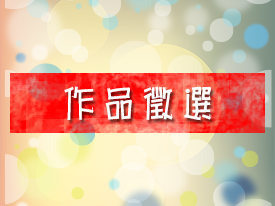
<style>
.page{position:relative;width:275px;height:206px}
.page>*{position:absolute;margin:0}
.t1{font:36px "ARHaiBaoB5-Bold";letter-spacing:0.1em;color:#fffefe}
</style>
<div class="page">
<p class="t1" style="left:64px;top:86px;width:147px;height:35px">作品徵選</p>
</div>
